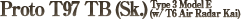
<style>
.page{position:relative;width:244px;height:19px;background:#ffffff}
.page>*{position:absolute;margin:0}
.t1{font:20px "RyuminPro-ExBold";letter-spacing:-0.08em;color:#4a3f32;font-weight:bold;scale:0.9 1}
.t2{font:10px "RyuminPro-ExBold";letter-spacing:-0.08em;color:#4a3f32;font-weight:bold;scale:0.9 1}
</style>
<div class="page">
<p class="t1" style="left:0px;top:1px;width:148px;height:19px">Proto T97 TB (Sk.)</p>
<p class="t2" style="left:150px;top:0px;width:62px;height:11px">Type 3 Model E</p>
<p class="t2" style="left:150px;top:9px;width:91px;height:11px">(w/ T6 Air Radar Kai)</p>
</div>
